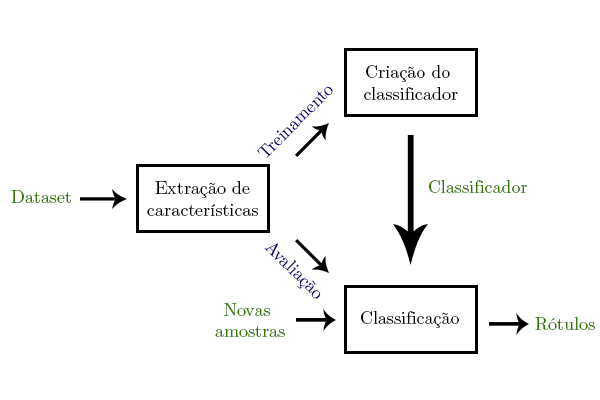
<style>
.page{position:relative;width:600px;height:400px;background:#ffffff}
.page>*{position:absolute;margin:0}
.t1{font:18px "CMUSerif-Roman";color:#000000}
.t2{font:18px "CMUSerif-Roman";color:#0b0377}
.t3{font:18px "CMUSerif-Roman";color:#347703}
</style>
<div class="page">
<p class="t1" style="left:364px;top:65px;width:94px;height:35px;text-align:center">Criação do <br>classificador</p>
<p class="t2" style="left:257px;top:86px;width:76px;height:72px;rotate:-45deg">Treinamento</p>
<p class="t1" style="left:147px;top:181px;width:111px;height:35px;text-align:center">Extração de<br>características</p>
<p class="t3" style="left:428px;top:180px;width:99px;height:13px">Classificador</p>
<p class="t3" style="left:11px;top:190px;width:60px;height:13px">Dataset</p>
<p class="t2" style="left:264px;top:243px;width:57px;height:56px;rotate:45deg">Avaliação</p>
<p class="t3" style="left:215px;top:303px;width:70px;height:34px;text-align:center">Novas <br>amostras</p>
<p class="t1" style="left:360px;top:311px;width:99px;height:17px">Classificação</p>
<p class="t3" style="left:535px;top:317px;width:60px;height:13px">Rótulos</p>
</div>
